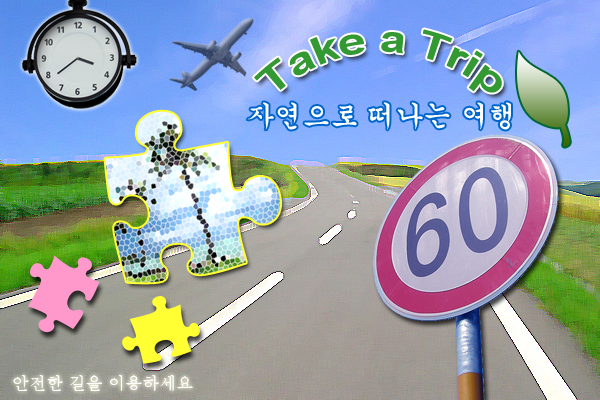
<style>
.page{position:relative;width:600px;height:400px}
.page>*{position:absolute;margin:0}
.t1{font:38px "Arial-BoldMT";color:#339933}
.t2{font:28px "Gungsuh";color:#ffffff}
.t3{font:17px "Batang";color:#ffffff}
</style>
<div class="page">
<p class="t1" style="left:254px;top:29px;width:248px;height:64px">Take a Trip</p>
<p class="t2" style="left:247px;top:102px;width:264px;height:28px">자연으로 떠나는 여행</p>
<p class="t3" style="left:13px;top:375px;width:180px;height:16px">안전한 길을 이용하세요</p>
</div>
